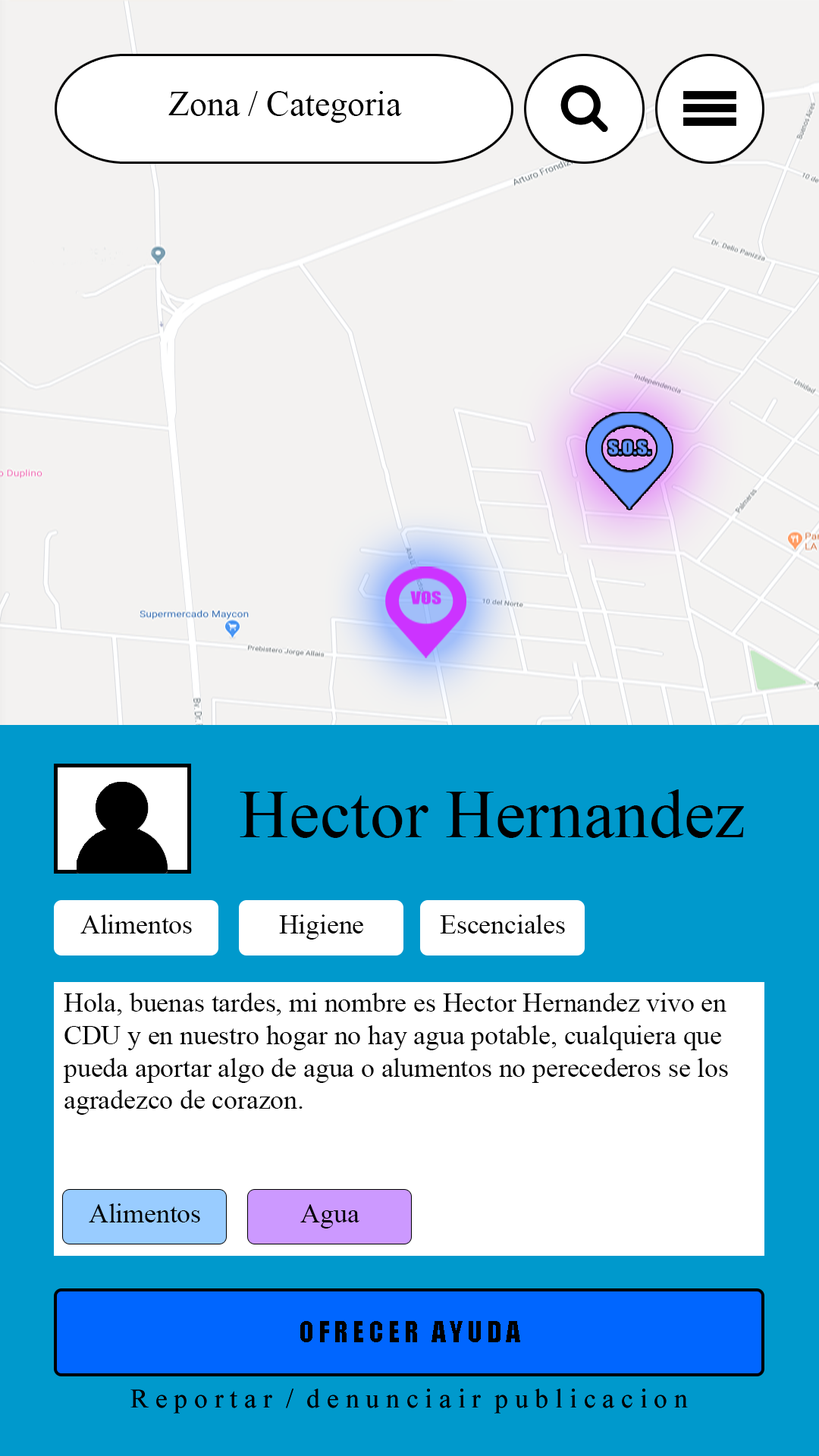
<style>
.page{position:relative;width:819px;height:1456px;background:#f3f2f1}
.page>*{position:absolute;margin:0}
.t1{font:34.7px "TimesNewRomanPSMT";color:#000000}
.t2{font:69.3px "TimesNewRomanPSMT";color:#000000}
.t3{font:27px "TimesNewRomanPSMT";color:#000000}
.t4{font:27px "Impact";color:#000000}
</style>
<div class="page">
<p class="t1" style="left:168px;top:91px;width:234px;height:32px">Zona / Categoria</p>
<p class="t2" style="left:240px;top:789px;width:504px;height:49px">Hector Hernandez</p>
<p class="t3" style="left:80px;top:915px;width:112px;height:18px">Alimentos</p>
<p class="t3" style="left:279px;top:915px;width:84px;height:25px">Higiene</p>
<p class="t3" style="left:440px;top:915px;width:125px;height:18px">Escenciales</p>
<p class="t3" style="left:63px;top:993px;width:665px;height:122px">Hola, buenas tardes, mi nombre es Hector Hernandez vivo en CDU y en nuestro hogar no hay agua potable, cualquiera que pueda aportar algo de agua o alumentos no perecederos se los agradezco de corazon.</p>
<p class="t3" style="left:89px;top:1203px;width:111px;height:19px">Alimentos</p>
<p class="t3" style="left:300px;top:1204px;width:59px;height:24px">Agua</p>
<p class="t4" style="left:300px;top:1321px;width:220px;height:21px">O F R E C E R   A Y U D A</p>
<p class="t3" style="left:130px;top:1388px;width:558px;height:26px">R e p o r t a r  /  d e n u n c i a i r  p u b l i c a c i o n</p>
<p class="t3" style="left:130px;top:1388px;width:558px;height:26px">R e p o r t a r  /  d e n u n c i a i r  p u b l i c a c i o n</p>
</div>
